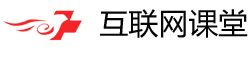
<style>
.page{position:relative;width:250px;height:60px;background:#ffffff}
.page>*{position:absolute;margin:0}
.t1{font:29.9px "MicrosoftYaHei";color:#050505}
</style>
<div class="page">
<p class="t1" style="left:100px;top:9px;width:148px;height:29px">互联网课堂</p>
</div>
